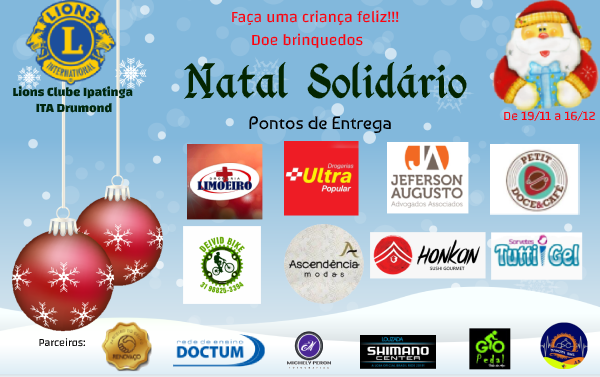
<style>
.page{position:relative;width:600px;height:377px;background:#82b8dc}
.page>*{position:absolute;margin:0}
.t1{font:16px "Changa-Regular";color:#fd020d}
.t2{font:53px "KingthingsCalligraphica2";color:#042501}
.t3{font:13px "Changa-ExtraBold";color:#00270f}
.t4{font:13px "Changa-Regular";color:#fd020d}
.t5{font:18px "Baumans-Regular";color:#000000}
.t6{font:11px "Changa-Regular";color:#0a0a0a}
</style>
<div class="page">
<p class="t1" style="left:232px;top:10px;width:167px;height:15px">Faça uma criança feliz!!!</p>
<p class="t1" style="left:252px;top:33px;width:111px;height:15px">Doe brinquedos</p>
<p class="t2" style="left:184px;top:61px;width:104px;height:38px">Natal</p>
<p class="t2" style="left:307px;top:61px;width:160px;height:38px">Solidário</p>
<p class="t3" style="left:13px;top:86px;width:120px;height:27px;text-align:center">Lions Clube Ipatinga <br>ITA Drumond</p>
<p class="t4" style="left:504px;top:111px;width:91px;height:10px">De 19/11 a 16/12</p>
<p class="t5" style="left:249px;top:116px;width:142px;height:18px">Pontos de Entrega</p>
<p class="t6" style="left:39px;top:338px;width:47px;height:9px">Parceiros:</p>
</div>
